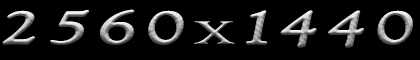
<style>
.page{position:relative;width:420px;height:60px;background:#000000}
.page>*{position:absolute;margin:0}
.t1{font:48px "GoudyOldStyleT-Italic";letter-spacing:0.075em;font-variant:small-caps;font-weight:bold;scale:1.67 1}
.t2{font:36px "RingbearerMedium";letter-spacing:0.075em;scale:1.67 1}
</style>
<div class="page">
<p class="t1" style="left:2px;top:9px;width:411px;height:39px">2560<span class="t2">x</span>1440</p>
<p class="t1" style="left:2px;top:9px;width:411px;height:39px">2560<span class="t2">x</span>1440</p>
</div>
